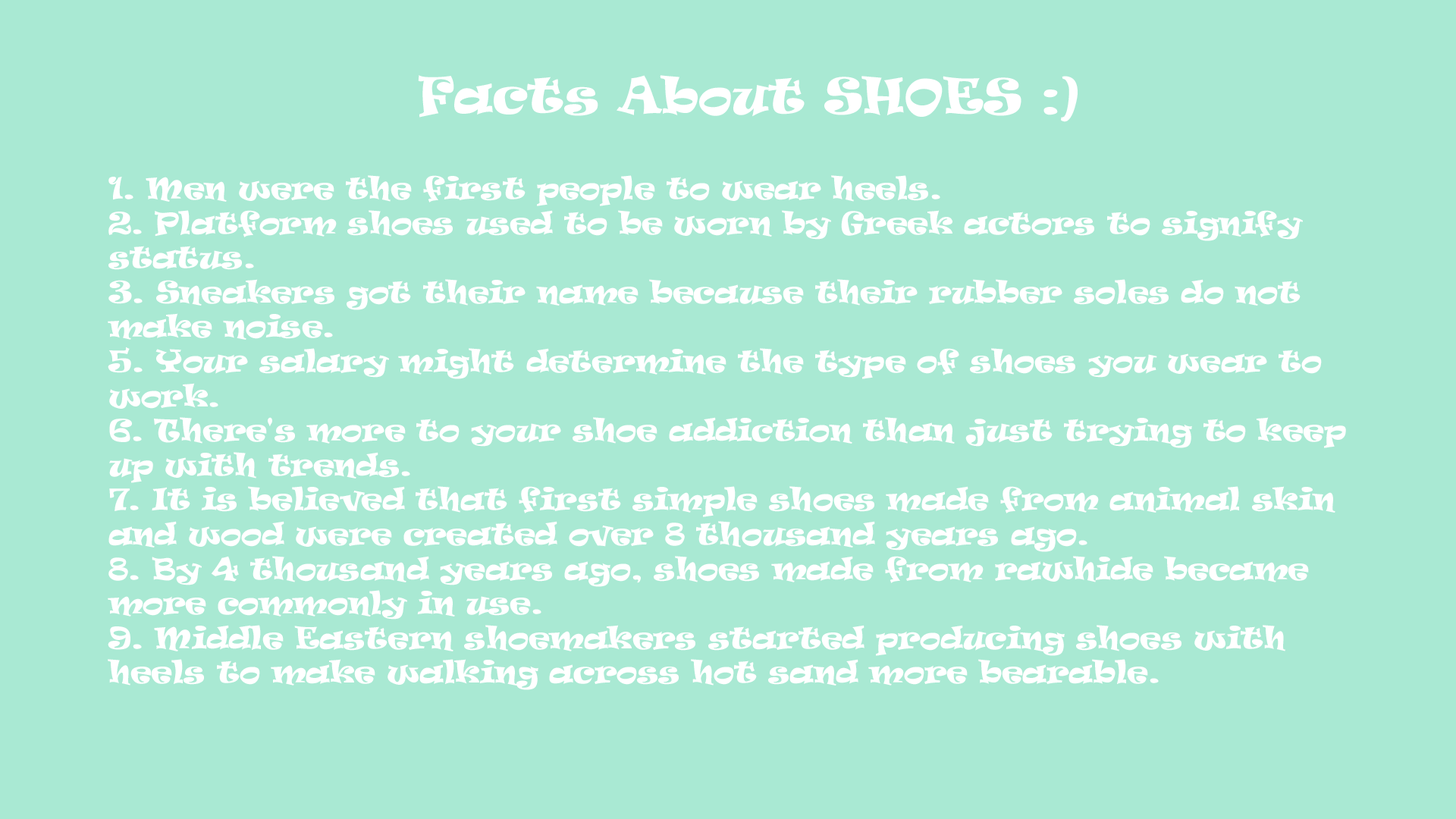
<style>
.page{position:relative;width:1456px;height:819px;background:#a9e9d3}
.page>*{position:absolute;margin:0}
.t1{font:47px "Ravie";color:#ffffff}
.t2{font:28.8px "Ravie";color:#ffffff}
</style>
<div class="page">
<p class="t1" style="left:418px;top:75px;width:660px;height:47px">Facts About SHOES :)</p>
<p class="t2" style="left:108px;top:175px;width:1238px;height:515px">1. Men were the first people to wear heels.<br>2. Platform shoes used to be worn by Greek actors to signify status.<br>3. Sneakers got their name because their rubber soles do not make noise.<br>5. Your salary might determine the type of shoes you wear to work.<br>6. There's more to your shoe addiction than just trying to keep up with trends.<br>7. It is believed that first simple shoes made from animal skin and wood were created over 8 thousand years ago.<br>8. By 4 thousand years ago, shoes made from rawhide became more commonly in use.<br>9. Middle Eastern shoemakers started producing shoes with heels to make walking across hot sand more bearable.</p>
</div>
